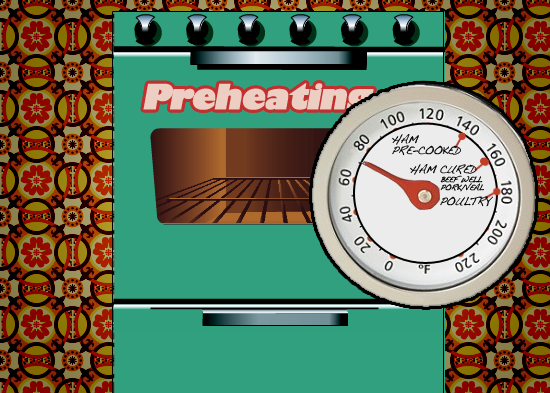
<style>
.page{position:relative;width:550px;height:393px;background:#30a07f}
.page>*{position:absolute;margin:0}
.t1{font:34.1px "GillSans-UltraBold";letter-spacing:-0.05em;color:#eccfc2;font-weight:bold;font-style:italic}
.t2{font:11.3px/11.3px "Handwriting-Dakota";letter-spacing:-0.05em;color:#000000}
.t3{font:11.3px "Handwriting-Dakota";letter-spacing:-0.05em;color:#000000}
.t4{font:7.9px/7.9px "Handwriting-Dakota";letter-spacing:-0.05em;color:#000000}
</style>
<div class="page">
<p class="t1" style="left:143px;top:83px;width:268px;height:32px">Preheating...</p>
<p class="t1" style="left:143px;top:83px;width:268px;height:32px">Preheating...</p>
<p class="t2" style="left:392px;top:134px;width:69px;height:22px">HAM <br>PRE-COOKED</p>
<p class="t3" style="left:410px;top:164px;width:67px;height:11px">HAM CURED</p>
<p class="t4" style="left:440px;top:175px;width:44px;height:17px">BEEF WELL<br>PORK/VEAL</p>
<p class="t3" style="left:440px;top:196px;width:53px;height:11px">POULTRY</p>
</div>
